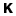
<style>
.page{position:relative;width:16px;height:16px;background:#ffffff}
.page>*{position:absolute;margin:0}
.t1{font:18px "SoyuzGrotesk-Bold";letter-spacing:-0.06em;color:#000000}
</style>
<div class="page">
<p class="t1" style="left:4px;top:3px;width:9px;height:10px">К</p>
</div>
